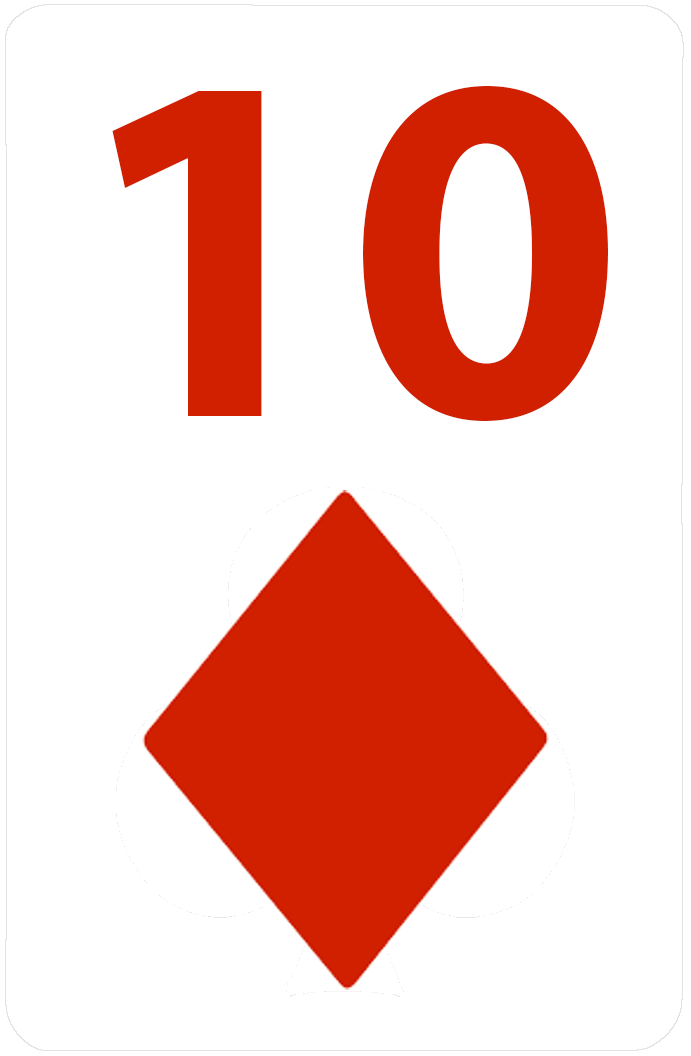
<style>
.page{position:relative;width:691px;height:1056px;background:#ffffff}
.page>*{position:absolute;margin:0}
.t1{font:500px "MyriadPro-Bold";color:#d02000}
</style>
<div class="page">
<p class="t1" style="left:112px;top:86px;width:496px;height:335px">10</p>
</div>
